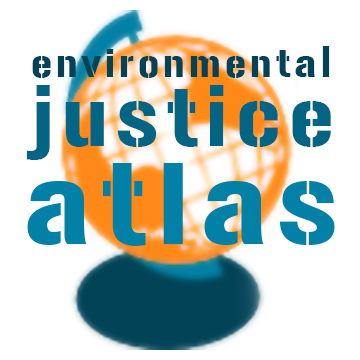
<style>
.page{position:relative;width:360px;height:360px;background:#ffffff}
.page>*{position:absolute;margin:0}
.t1{font:38.4px "Gunplay-Regular";letter-spacing:0.1em;color:#024357}
.t2{font:80.7px "Gunplay-Regular";letter-spacing:0.1em;color:#036483}
</style>
<div class="page">
<p class="t1" style="left:32px;top:46px;width:298px;height:32px">environmental</p>
<p class="t2" style="left:26px;top:85px;width:305px;height:75px">justice</p>
</div>
